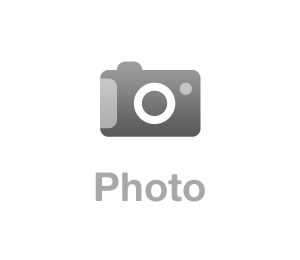
<style>
.page{position:relative;width:300px;height:260px;background:#ffffff}
.page>*{position:absolute;margin:0}
.t1{font:40px "AlteHaasGrotesk_Bold";color:#a8a8a8}
</style>
<div class="page">
<p class="t1" style="left:95px;top:172px;width:110px;height:30px">Photo</p>
</div>
